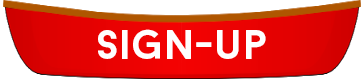
<style>
.page{position:relative;width:361px;height:79px}
.page>*{position:absolute;margin:0}
.t1{font:41.1px "BaronNeueBold";letter-spacing:0.02em;color:#fffefe}
</style>
<div class="page">
<p class="t1" style="left:98px;top:29px;width:168px;height:30px">Sign-up</p>
</div>
